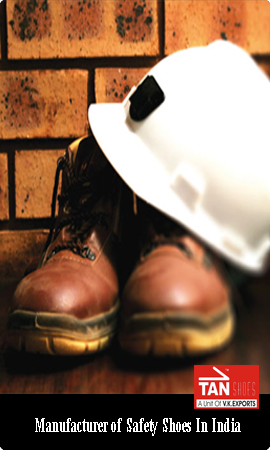
<style>
.page{position:relative;width:270px;height:450px}
.page>*{position:absolute;margin:0}
.t1{font:20.7px "TimesNewRomanPS-BoldMT";letter-spacing:0.01em;color:#fcfcfc;scale:0.55 1}
</style>
<div class="page">
<p class="t1" style="left:35px;top:418px;width:206px;height:18px">Manufacturer of Safety Shoes In India</p>
</div>
